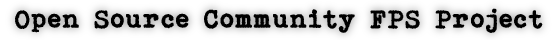
<style>
.page{position:relative;width:560px;height:40px}
.page>*{position:absolute;margin:0}
.t1{font:25.8px "Bohemian-typewriter";color:#000000;font-weight:bold}
</style>
<div class="page">
<p class="t1" style="left:15px;top:8px;width:528px;height:25px">Open Source Community FPS Project</p>
</div>
